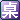
<style>
.page{position:relative;width:20px;height:20px;background:#ffffff}
.page>*{position:absolute;margin:0}
.t1{font:18px "SimHei";color:#ffffff}
</style>
<div class="page">
<p class="t1" style="left:2px;top:2px;width:16px;height:16px">桌</p>
</div>
